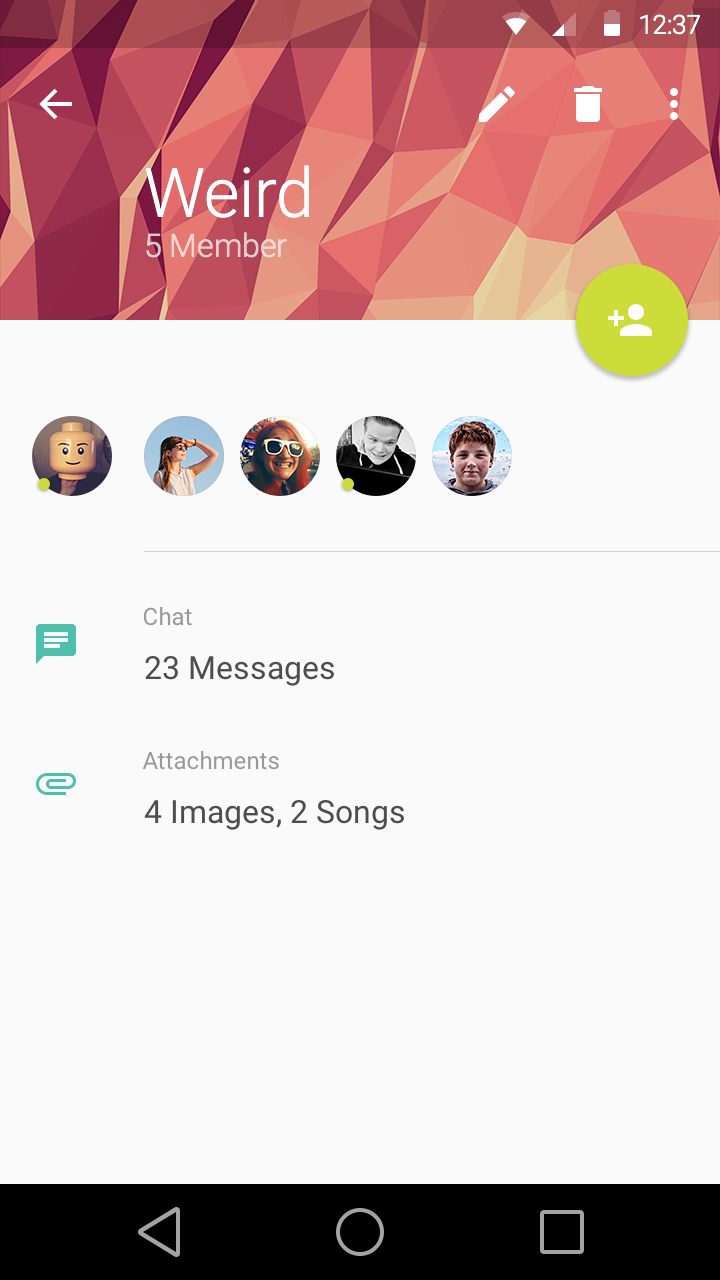
<style>
.page{position:relative;width:720px;height:1280px;background:#fafafa}
.page>*{position:absolute;margin:0}
.t1{font:26.1px "Roboto-Light";color:#ffffff}
.t2{font:68px "Roboto-Light";color:#ffffff}
.t3{font:32px "Roboto-Light";color:#e8cdcf}
.t4{font:24px "Roboto-Regular";color:#999999}
.t5{font:32px "Roboto-Regular";color:#4d4d4d}
</style>
<div class="page">
<p class="t1" style="left:640px;top:14px;width:60px;height:21px">12:37</p>
<p class="t2" style="left:145px;top:165px;width:164px;height:53px">Weird</p>
<p class="t3" style="left:146px;top:232px;width:141px;height:26px">5 Member</p>
<p class="t4" style="left:143px;top:607px;width:49px;height:19px">Chat</p>
<p class="t5" style="left:145px;top:656px;width:189px;height:30px">23 Messages</p>
<p class="t4" style="left:142px;top:751px;width:137px;height:19px">Attachments</p>
<p class="t5" style="left:144px;top:800px;width:260px;height:30px">4 Images, 2 Songs</p>
</div>
